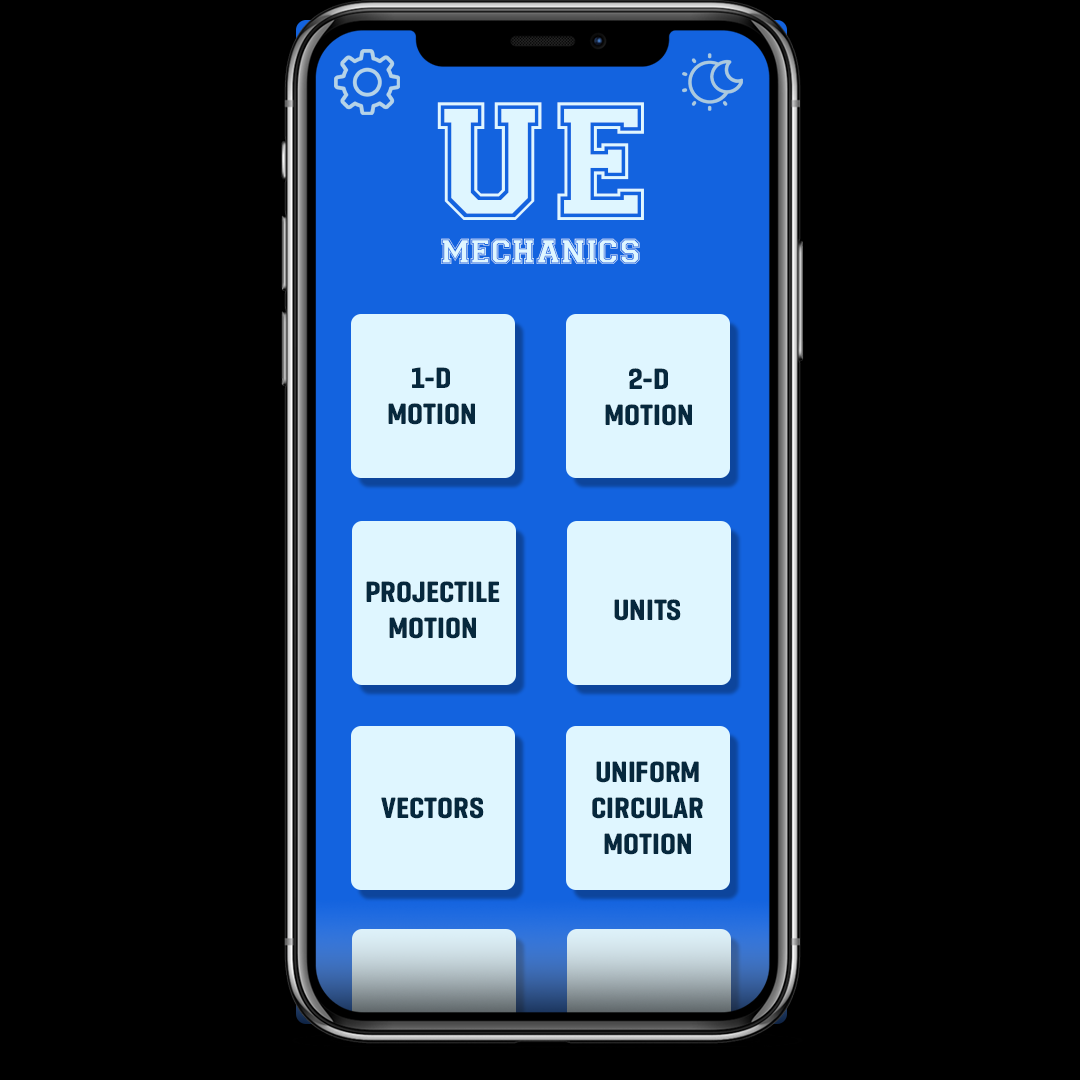
<style>
.page{position:relative;width:1080px;height:1080px;background:#000000}
.page>*{position:absolute;margin:0}
.t1{font:168px "Varsity-Regular";color:#dff6ff}
.t2{font:36px "Varsity-Regular";color:#dff6ff}
.t3{font:30px "GeogrotesqueCondW03-Bold";color:#06283d}
</style>
<div class="page">
<p class="t1" style="left:437px;top:102px;width:207px;height:118px">UE</p>
<p class="t2" style="left:441px;top:238px;width:199px;height:26px">MECHANICS</p>
<p class="t3" style="left:388px;top:367px;width:87px;height:58px;text-align:center">1-D<br>MOTION</p>
<p class="t3" style="left:605px;top:368px;width:87px;height:58px;text-align:center">2-D<br>MOTION</p>
<p class="t3" style="left:366px;top:581px;width:134px;height:58px;text-align:center">PROJECTILE<br>MOTION</p>
<p class="t3" style="left:614px;top:599px;width:67px;height:22px">UNITS</p>
<p class="t3" style="left:592px;top:761px;width:111px;height:94px;text-align:center">UNIFORM<br>CIRCULAR<br>MOTION</p>
<p class="t3" style="left:381px;top:797px;width:103px;height:22px">VECTORS</p>
</div>
